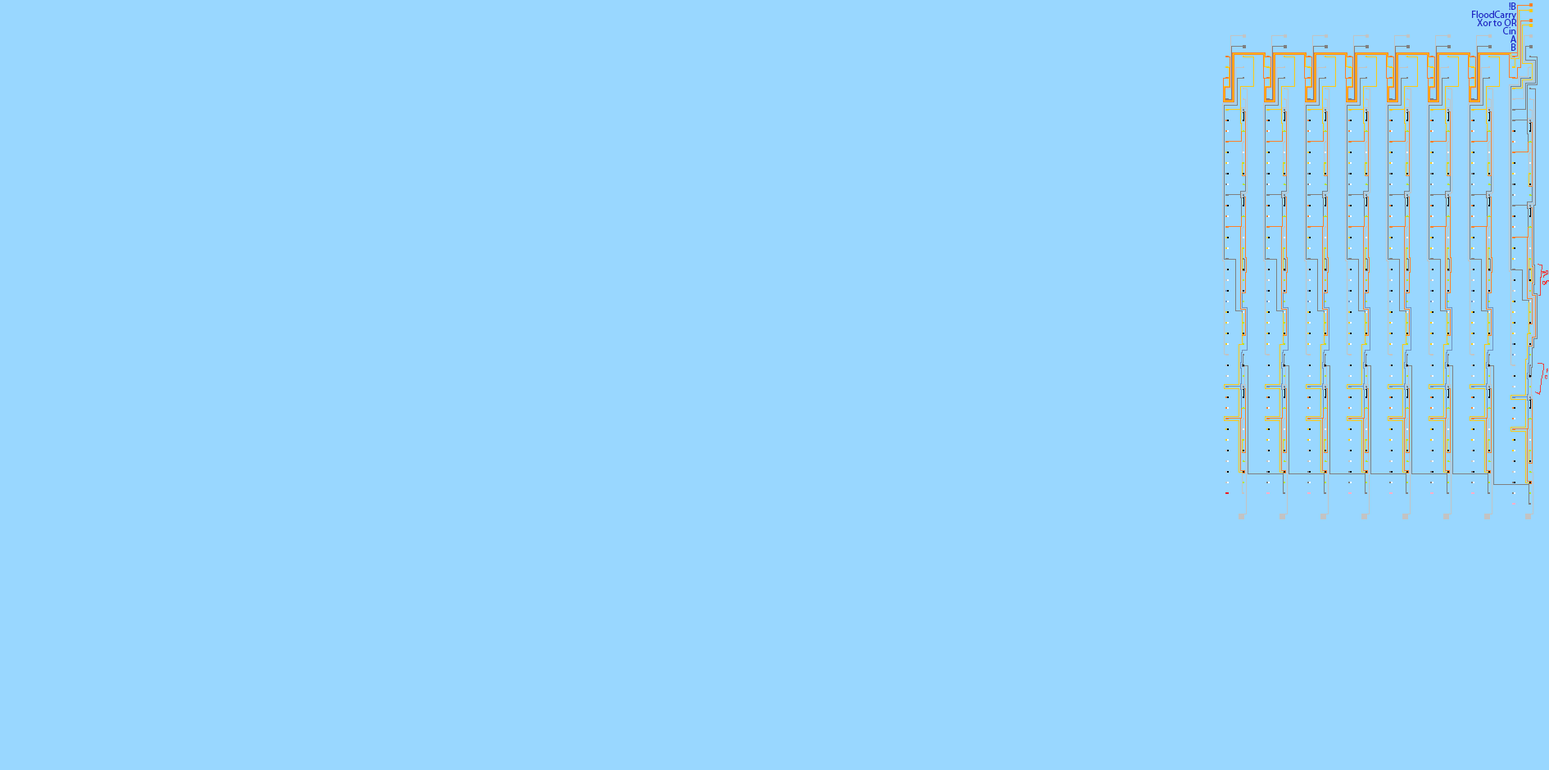
<style>
.page{position:relative;width:1549px;height:770px;background:#99d7ff}
.page>*{position:absolute;margin:0}
.t1{font:9.8px/8.2px "MyriadPro-Regular";color:#1f27c6}
</style>
<div class="page">
<p class="t1" style="left:1472px;top:2px;width:45px;height:49px;text-align:right">!B<br>FloodCarry<br>Xor to OR<br>Cin<br>A<br>B</p>
</div>
